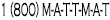
<style>
.page{position:relative;width:110px;height:20px;background:#ffffff}
.page>*{position:absolute;margin:0}
.t1{font:19.5px "CopperplateGothic-Light";color:#000000;scale:0.53 1}
</style>
<div class="page">
<p class="t1" style="left:2px;top:1px;width:108px;height:17px">1 (800) M-A-T-T-M-A-T</p>
</div>
